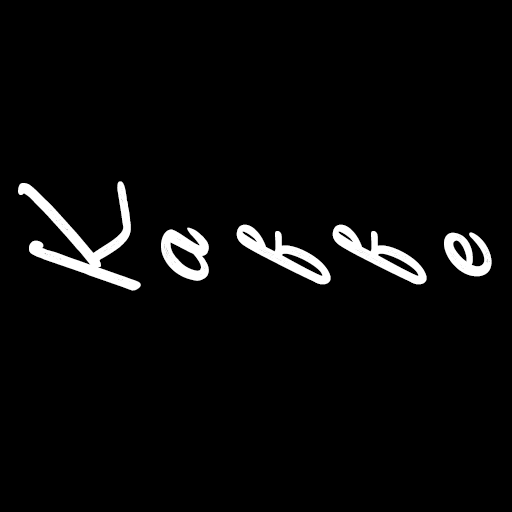
<style>
.page{position:relative;width:512px;height:512px;background:#000000}
.page>*{position:absolute;margin:0}
.t1{font:183.1px "Painting-in-the-Sunlight";letter-spacing:0.05em;color:#ffffff;font-weight:bold}
</style>
<div class="page">
<p class="t1" style="left:18px;top:181px;width:123px;height:110px;rotate:-99deg">K</p>
<p class="t1" style="left:161px;top:227px;width:48px;height:54px;rotate:-90deg">a</p>
<p class="t1" style="left:236px;top:224px;width:95px;height:61px;rotate:-90deg">f</p>
<p class="t1" style="left:332px;top:224px;width:95px;height:61px;rotate:-90deg">f</p>
<p class="t1" style="left:444px;top:232px;width:48px;height:45px;rotate:-90deg">e</p>
</div>
